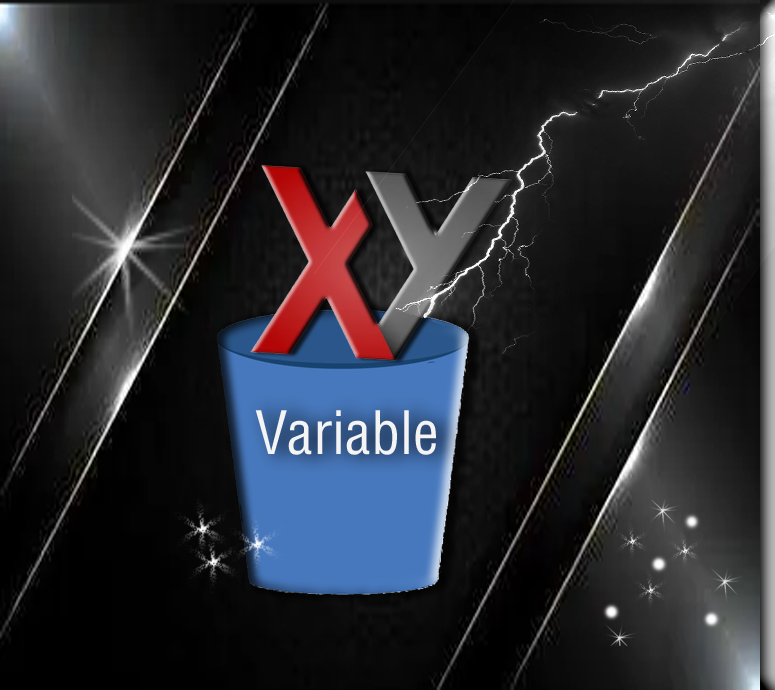
<style>
.page{position:relative;width:775px;height:690px}
.page>*{position:absolute;margin:0}
.t1{font:58.2px "HelveticaLTStd-Cond";color:#f4f4f5}
</style>
<div class="page">
<p class="t1" style="left:255px;top:410px;width:181px;height:45px">Variable</p>
</div>
